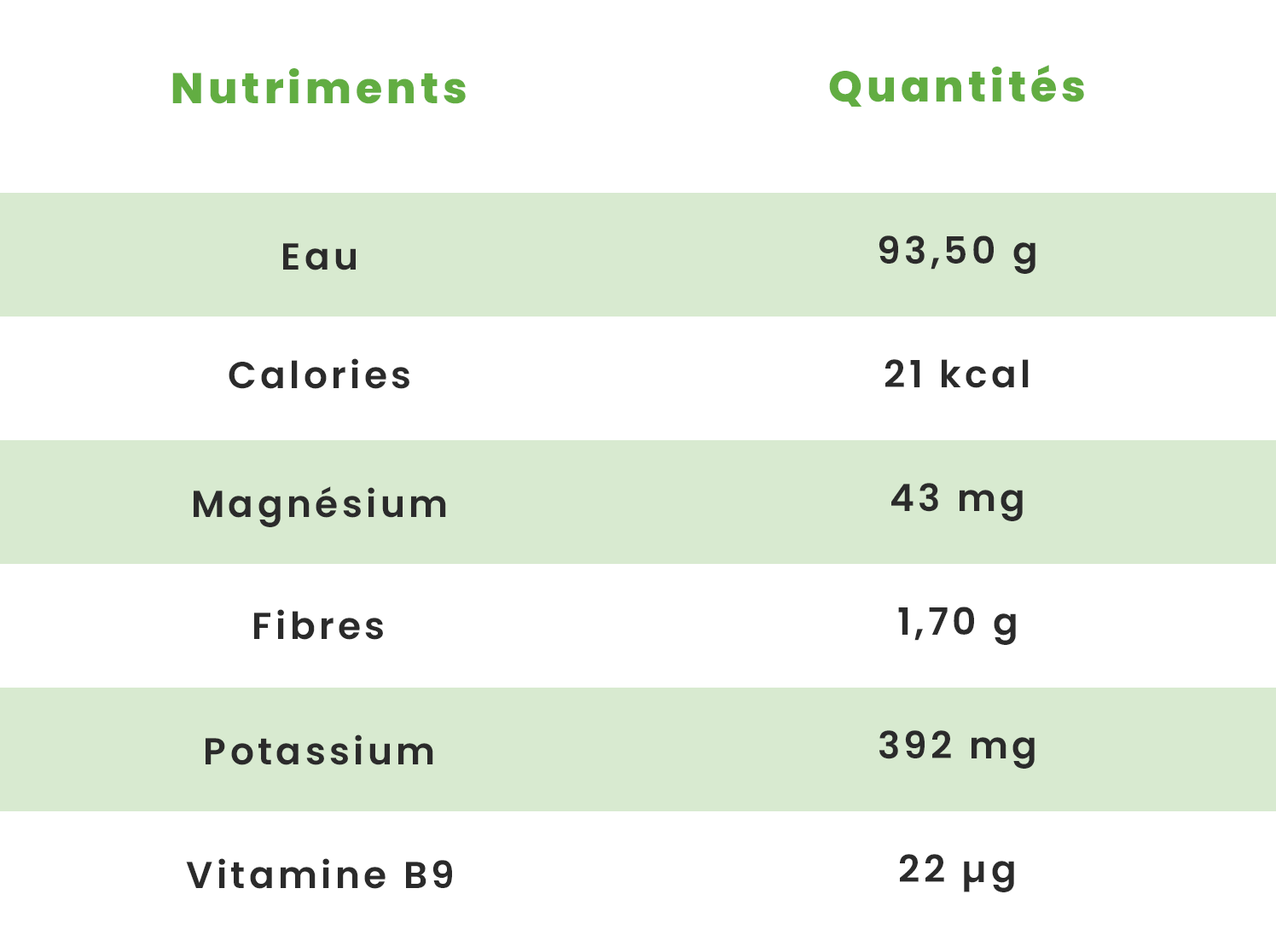
<style>
.page{position:relative;width:1276px;height:935px;background:#ffffff}
.page>*{position:absolute;margin:0}
.t1{font:42.9px "Poppins-ExtraBold";letter-spacing:0.1em;color:#62ad42}
.t2{font:37.5px "Poppins-SemiBold";letter-spacing:0.1em;color:#2b2b2b}
</style>
<div class="page">
<p class="t1" style="left:829px;top:65px;width:255px;height:42px">Quantités</p>
<p class="t1" style="left:172px;top:68px;width:294px;height:36px">Nutriments</p>
<p class="t2" style="left:283px;top:243px;width:73px;height:27px">Eau</p>
<p class="t2" style="left:878px;top:235px;width:157px;height:39px">93,50 g</p>
<p class="t2" style="left:229px;top:358px;width:180px;height:31px">Calories</p>
<p class="t2" style="left:885px;top:359px;width:143px;height:29px">21 kcal</p>
<p class="t2" style="left:891px;top:483px;width:132px;height:38px">43 mg</p>
<p class="t2" style="left:194px;top:486px;width:252px;height:41px">Magnésium</p>
<p class="t2" style="left:254px;top:609px;width:129px;height:31px">Fibres</p>
<p class="t2" style="left:898px;top:606px;width:118px;height:39px">1,70 g</p>
<p class="t2" style="left:206px;top:734px;width:227px;height:31px">Potassium</p>
<p class="t2" style="left:879px;top:730px;width:155px;height:38px">392 mg</p>
<p class="t2" style="left:186px;top:858px;width:266px;height:31px">Vitamine B9</p>
<p class="t2" style="left:900px;top:854px;width:114px;height:38px">22 µg</p>
</div>
